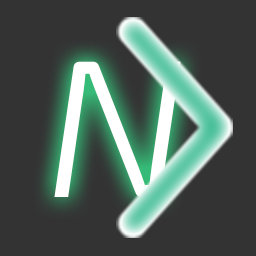
<style>
.page{position:relative;width:256px;height:256px;background:#333333}
.page>*{position:absolute;margin:0}
.t1{font:196px "Exo2-LightItalic";color:#ffffff;scale:1.05 1}
</style>
<div class="page">
<p class="t1" style="left:54px;top:61px;width:127px;height:136px">N</p>
</div>
